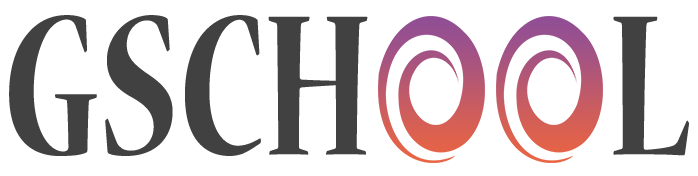
<style>
.page{position:relative;width:698px;height:176px;background:#ffffff}
.page>*{position:absolute;margin:0}
.t1{font:222.6px "NuevaStd-Bold";color:#414141;scale:0.69 1}
</style>
<div class="page">
<p class="t1" style="left:9px;top:15px;width:681px;height:141px">GSCH        L</p>
</div>
